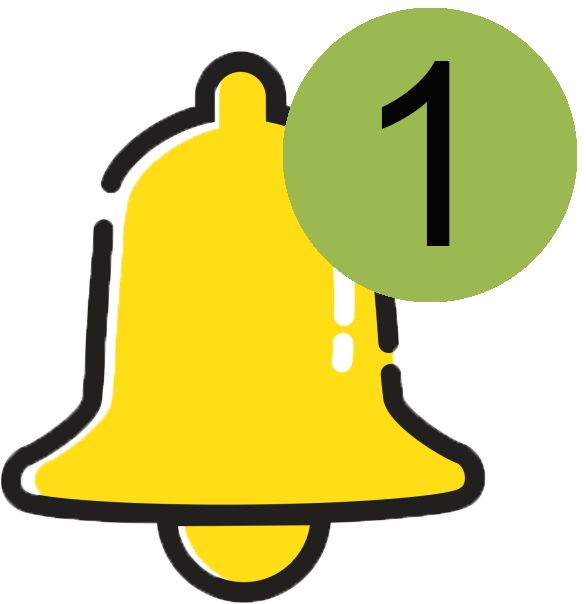
<style>
.page{position:relative;width:586px;height:604px;background:#ffffff}
.page>*{position:absolute;margin:0}
.t1{font:256px "ArialMT";color:#040404}
</style>
<div class="page">
<p class="t1" style="left:381px;top:61px;width:69px;height:185px">1</p>
</div>
